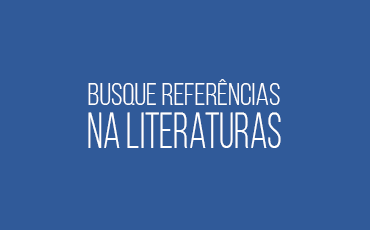
<style>
.page{position:relative;width:370px;height:230px;background:#305a99}
.page>*{position:absolute;margin:0}
.t1{font:7.5px "BebasNeueBook";color:#ffffff}
.t2{font:50.5px "BebasNeueBook";color:#ffffff;scale:0.79 1}
</style>
<div class="page">
<p class="t1" style="left:88px;top:79px;width:192px;height:26px;text-align:center">busque referÊncias</p>
<p class="t2" style="left:88px;top:112px;width:193px;height:36px">na literaturas</p>
</div>
